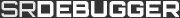
<style>
.page{position:relative;width:180px;height:18px;background:#333333}
.page>*{position:absolute;margin:0}
.t1{font:22px "Orbitron-Black";color:#ffffff}
.t2{font:22px "Orbitron-Medium";color:#e7e7e7}
</style>
<div class="page">
<p class="t1" style="left:1px;top:1px;width:178px;height:16px"><span class="t2">SR</span>DEBUGGER</p>
</div>
